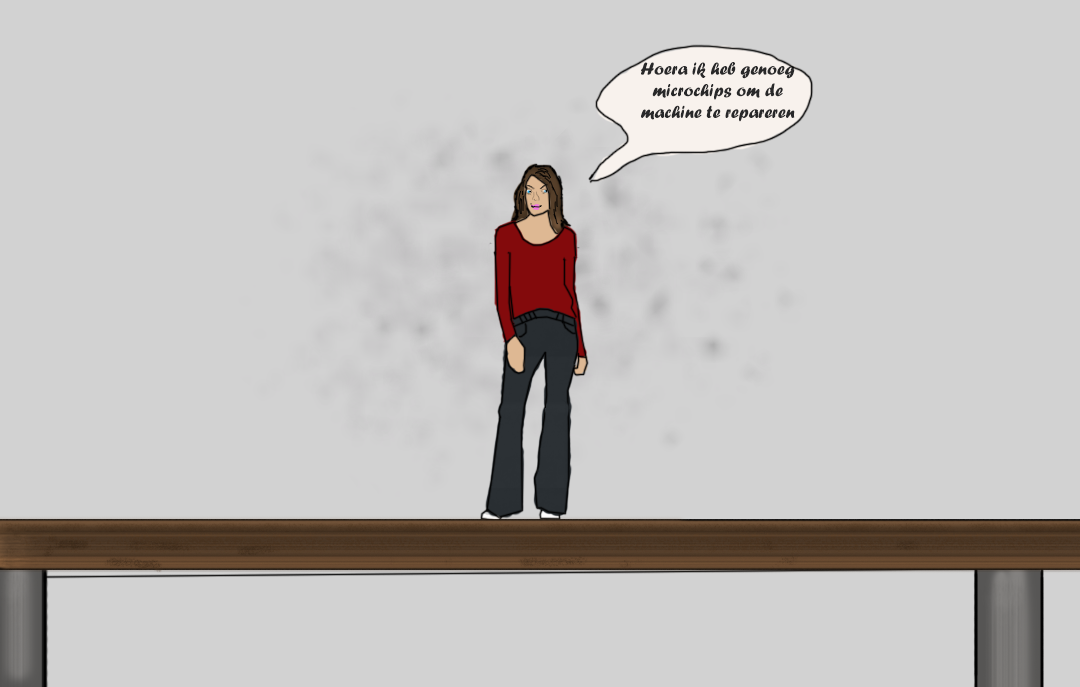
<style>
.page{position:relative;width:1080px;height:687px;background:#d2d2d2}
.page>*{position:absolute;margin:0}
.t1{font:18px "ForteMT";color:#282829}
</style>
<div class="page">
<p class="t1" style="left:641px;top:62px;width:154px;height:60px;text-align:center">Hoera ik heb genoeg microchips om de machine te repareren</p>
</div>
